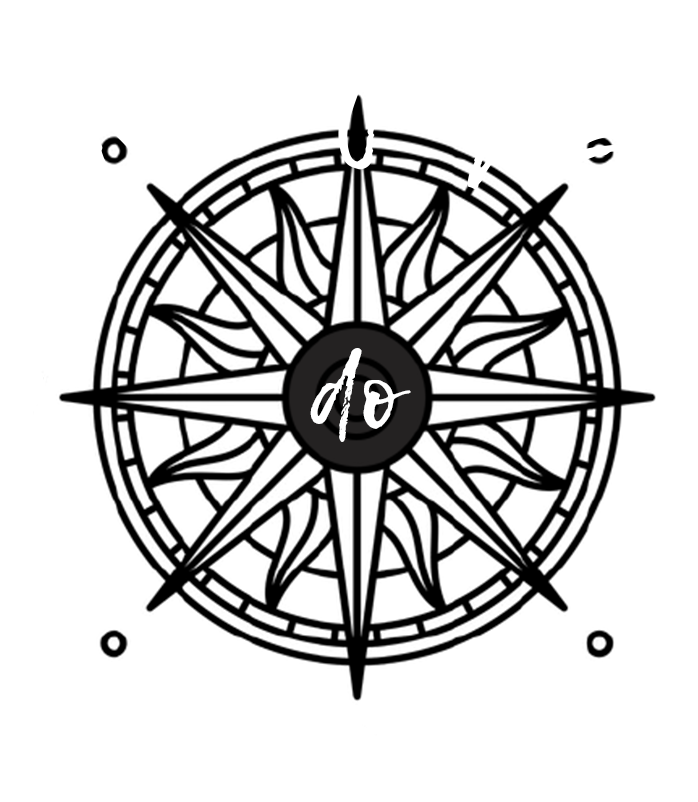
<style>
.page{position:relative;width:698px;height:802px;background:#ffffff}
.page>*{position:absolute;margin:0}
.t1{font:92.7px "LemonTuesday";color:#ffffff}
</style>
<div class="page">
<p class="t1" style="left:310px;top:348px;width:101px;height:94px">do</p>
</div>
